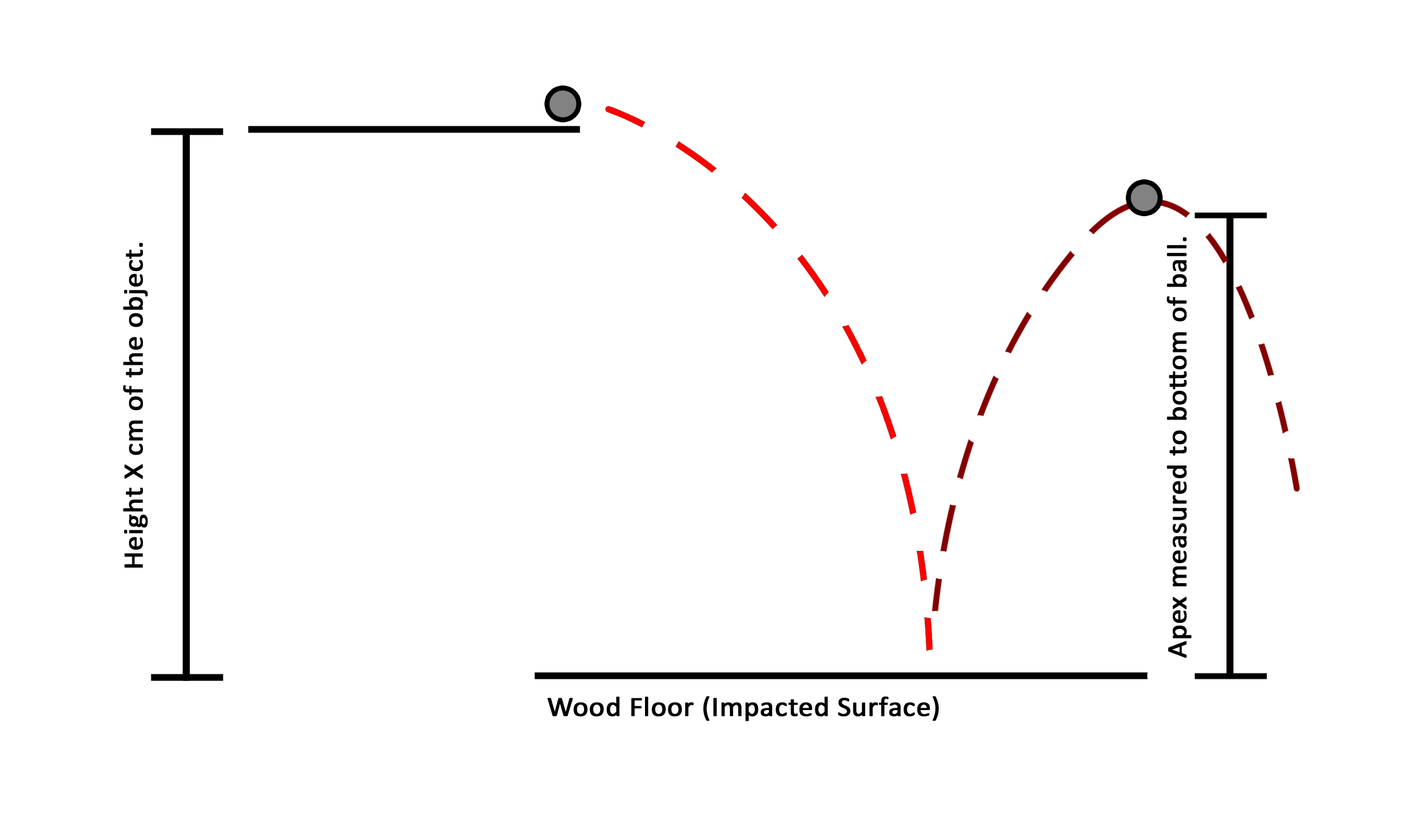
<style>
.page{position:relative;width:1424px;height:838px;background:#ffffff}
.page>*{position:absolute;margin:0}
.t1{font:27.9px "Calibri";color:#000000;font-weight:bold;scale:1.05 1}
</style>
<div class="page">
<p class="t1" style="left:123px;top:242px;width:25px;height:325px;rotate:-90deg">Height X cm of the object.</p>
<p class="t1" style="left:1166px;top:237px;width:26px;height:421px;rotate:-90deg">Apex measured to bottom of ball.</p>
<p class="t1" style="left:547px;top:696px;width:392px;height:25px">Wood Floor (Impacted Surface)</p>
</div>
